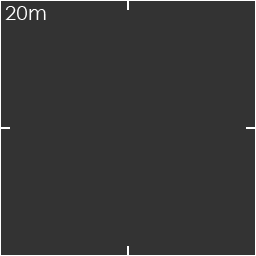
<style>
.page{position:relative;width:256px;height:256px;background:#333333}
.page>*{position:absolute;margin:0}
.t1{font:20px "CenturyGothic";letter-spacing:0.02em;color:#ffffff}
</style>
<div class="page">
<p class="t1" style="left:5px;top:6px;width:41px;height:14px">20m</p>
</div>
